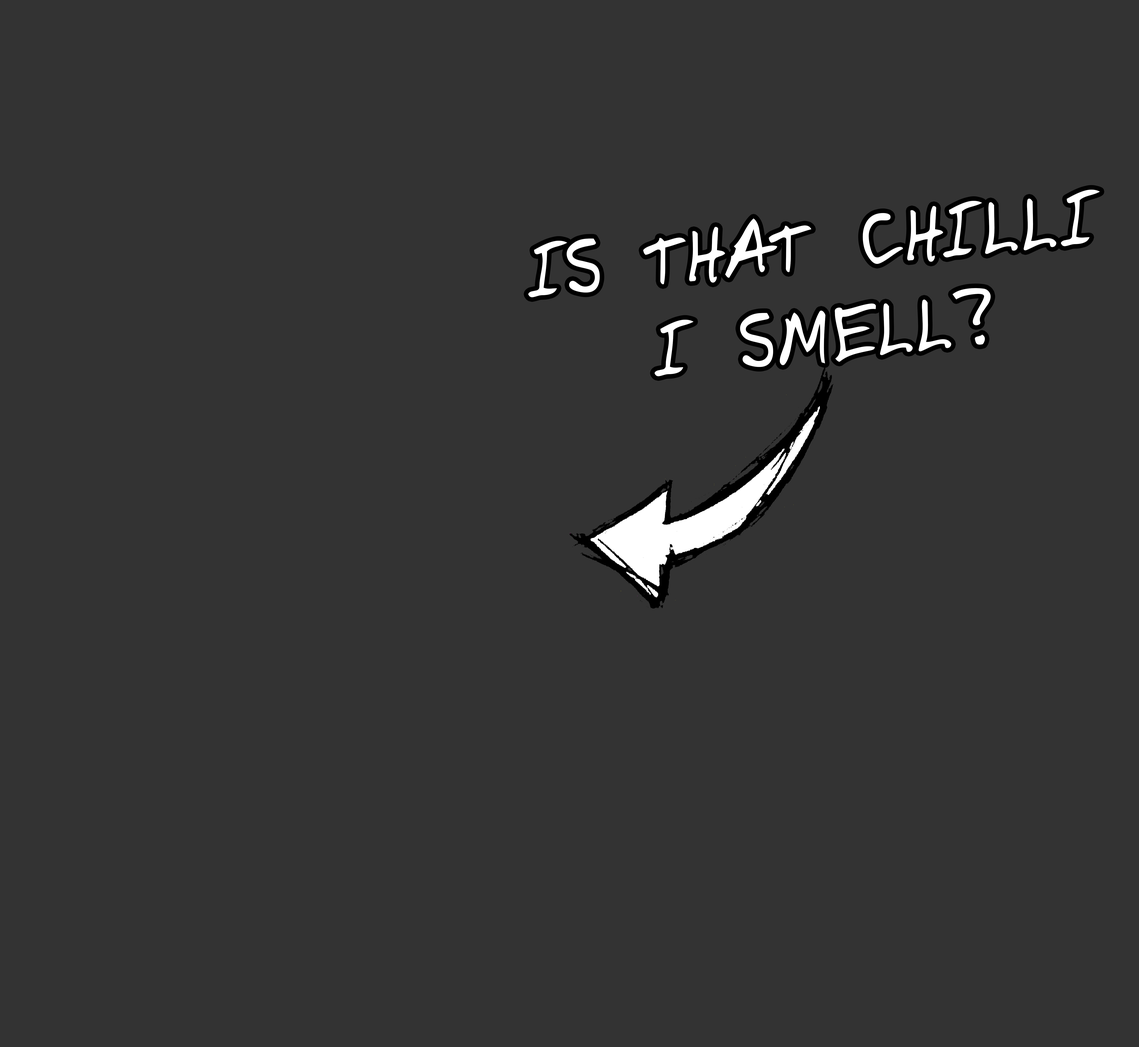
<style>
.page{position:relative;width:1139px;height:1047px;background:#333333}
.page>*{position:absolute;margin:0}
.t1{font:75.6px "DomesticManners";letter-spacing:0.04em;color:#ffffff}
</style>
<div class="page">
<p class="t1" style="left:528px;top:190px;width:571px;height:186px;text-align:center;rotate:-5deg">IS THAT CHILLI<br>I SMELL?</p>
</div>
